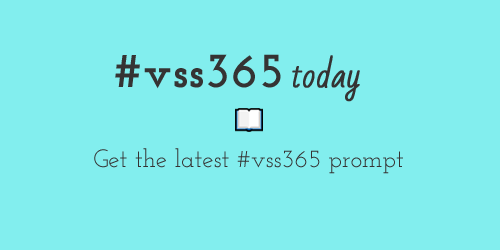
<style>
.page{position:relative;width:500px;height:250px;background:#82eeee}
.page>*{position:absolute;margin:0}
.t1{font:49.8px "JosefinSlab-Bold";color:#353333}
.t2{font:32.9px "BadScript-Regular";color:#353333;font-weight:bold}
.t3{font:24.9px "JosefinSlab";color:#353333}
</style>
<div class="page">
<p class="t1" style="left:115px;top:54px;width:166px;height:35px">#vss365</p>
<p class="t2" style="left:292px;top:55px;width:68px;height:47px">today</p>
<p class="t3" style="left:94px;top:148px;width:309px;height:26px">Get the latest #vss365 prompt</p>
</div>
